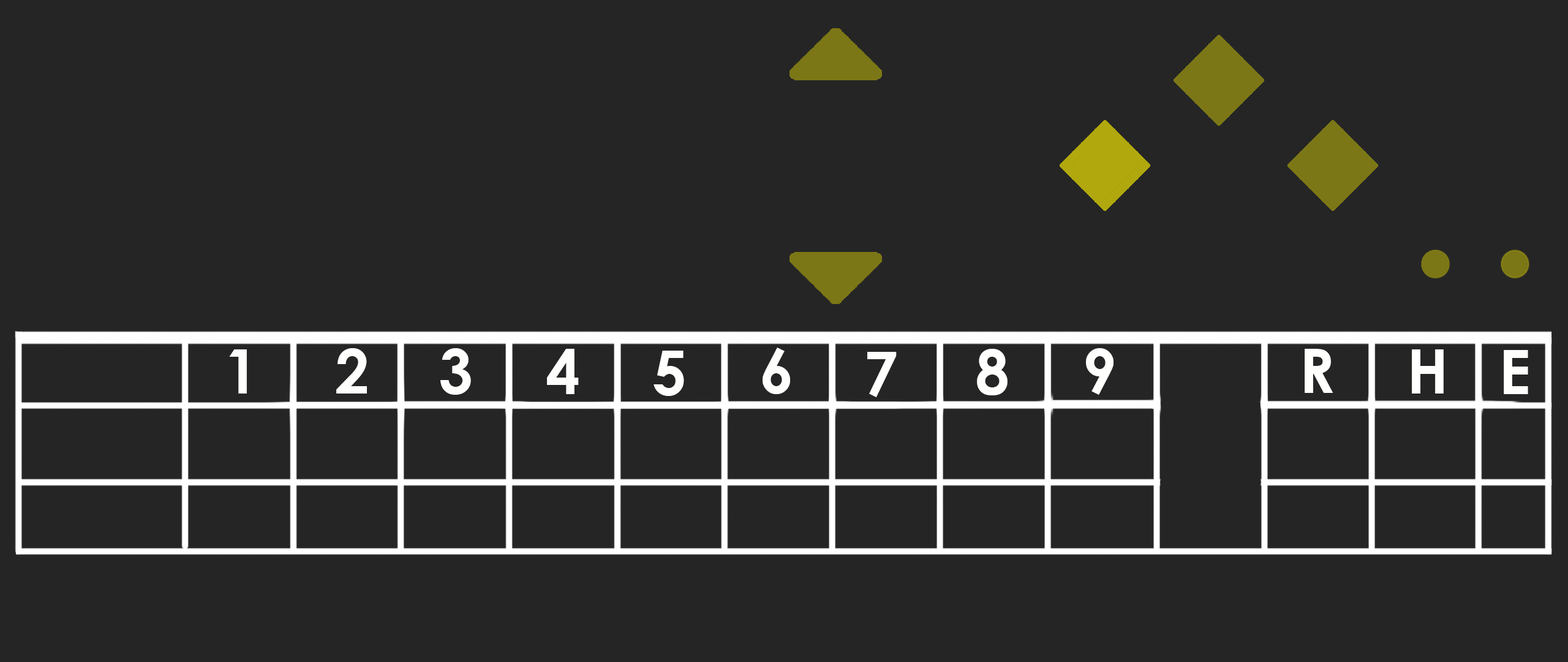
<style>
.page{position:relative;width:1568px;height:662px;background:#252525}
.page>*{position:absolute;margin:0}
.t1{font:61.3px "CenturyGothic-Bold";color:#fffffe}
</style>
<div class="page">
<p class="t1" style="left:229px;top:349px;width:18px;height:44px">1</p>
<p class="t1" style="left:336px;top:348px;width:31px;height:45px">2</p>
<p class="t1" style="left:440px;top:348px;width:31px;height:46px">3</p>
<p class="t1" style="left:547px;top:349px;width:32px;height:45px">4</p>
<p class="t1" style="left:654px;top:350px;width:30px;height:46px">5</p>
<p class="t1" style="left:763px;top:347px;width:27px;height:47px">6</p>
<p class="t1" style="left:867px;top:352px;width:30px;height:45px">7</p>
<p class="t1" style="left:977px;top:349px;width:31px;height:46px">8</p>
<p class="t1" style="left:1086px;top:348px;width:28px;height:46px">9</p>
<p class="t1" style="left:1305px;top:349px;width:28px;height:44px">R</p>
<p class="t1" style="left:1412px;top:349px;width:32px;height:44px">H</p>
<p class="t1" style="left:1504px;top:350px;width:24px;height:44px">E</p>
</div>
